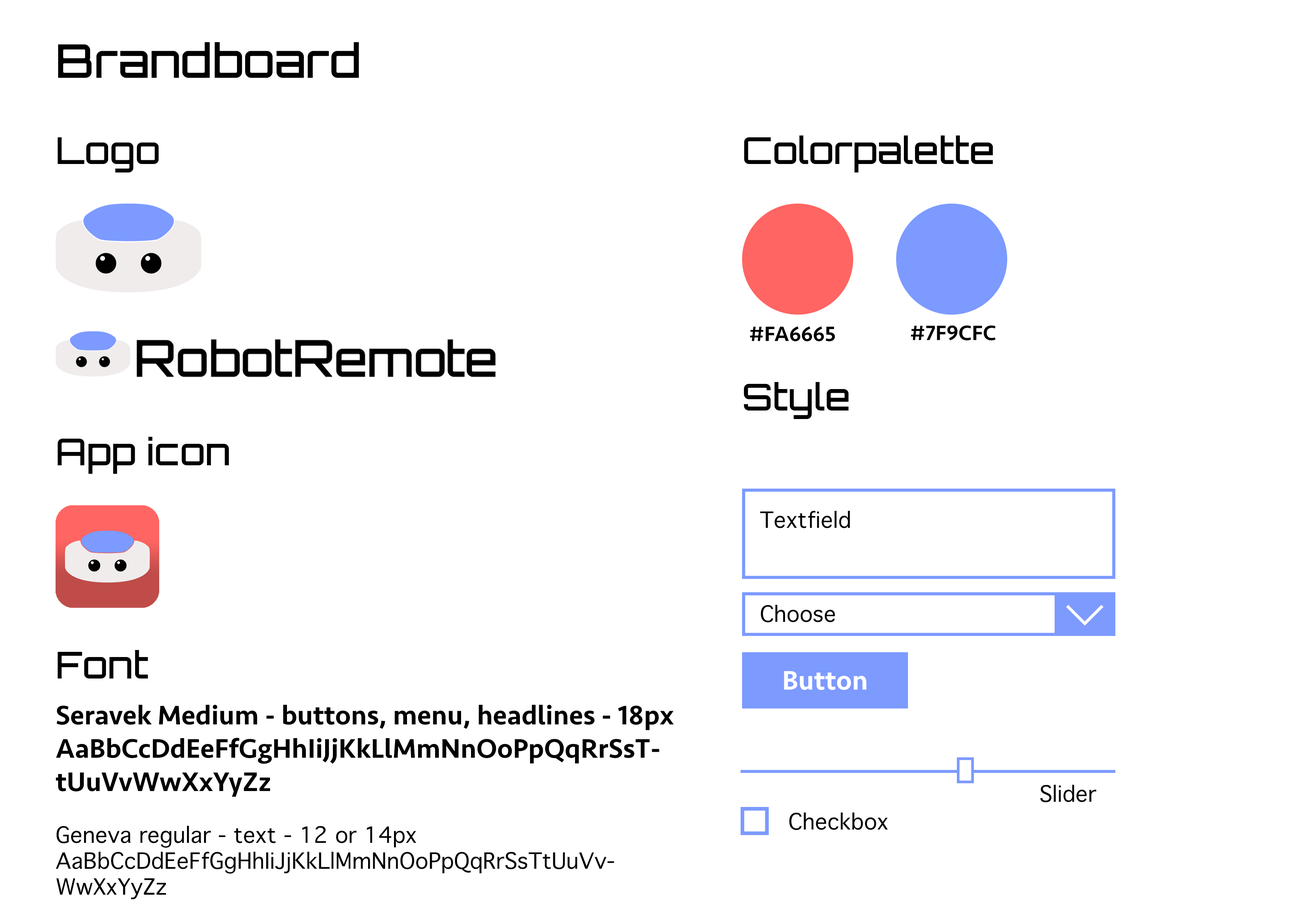
<style>
.page{position:relative;width:1299px;height:918px;background:#ffffff}
.page>*{position:absolute;margin:0}
.t1{font:46.3px "Orbitron-Medium";color:#000000}
.t2{font:37px "Orbitron-Medium";color:#000000}
.t3{font:21.6px "Seravek-Medium";color:#000000}
.t4{font:21.6px "Geneva";color:#000000}
.t5{font:27.8px "Seravek-Medium";color:#ffffff}
.t6{font:27.8px "Seravek-Medium";color:#000000}
</style>
<div class="page">
<p class="t1" style="left:58px;top:42px;width:301px;height:36px">Brandboard</p>
<p class="t2" style="left:57px;top:137px;width:102px;height:36px">Logo</p>
<p class="t2" style="left:744px;top:136px;width:249px;height:37px">Colorpalette</p>
<p class="t3" style="left:750px;top:326px;width:85px;height:15px">#FA6665</p>
<p class="t3" style="left:911px;top:325px;width:85px;height:16px">#7F9CFC</p>
<p class="t2" style="left:744px;top:382px;width:105px;height:37px">Style</p>
<p class="t2" style="left:57px;top:437px;width:172px;height:37px">App icon</p>
<p class="t4" style="left:760px;top:511px;width:90px;height:17px">Textfield</p>
<p class="t4" style="left:760px;top:605px;width:75px;height:18px">Choose</p>
<p class="t2" style="left:57px;top:650px;width:91px;height:29px">Font</p>
<p class="t5" style="left:784px;top:671px;width:82px;height:19px">Button</p>
<p class="t6" style="left:56px;top:705px;width:618px;height:195px">Seravek Medium - buttons, menu, headlines - 18px<br>AaBbCcDdEeFfGgHhIiJjKkLlMmNnOoPpQqRrSsTtUuVvWwXxYyZz<br><span class="t4"><br>Geneva regular - text - 12 or 14px<br>AaBbCcDdEeFfGgHhIiJjKkLlMmNnOoPpQqRrSsTtUuVvWwXxYyZz</span></p>
<p class="t4" style="left:1040px;top:785px;width:56px;height:18px">Slider</p>
<p class="t4" style="left:789px;top:813px;width:99px;height:17px">Checkbox</p>
</div>
